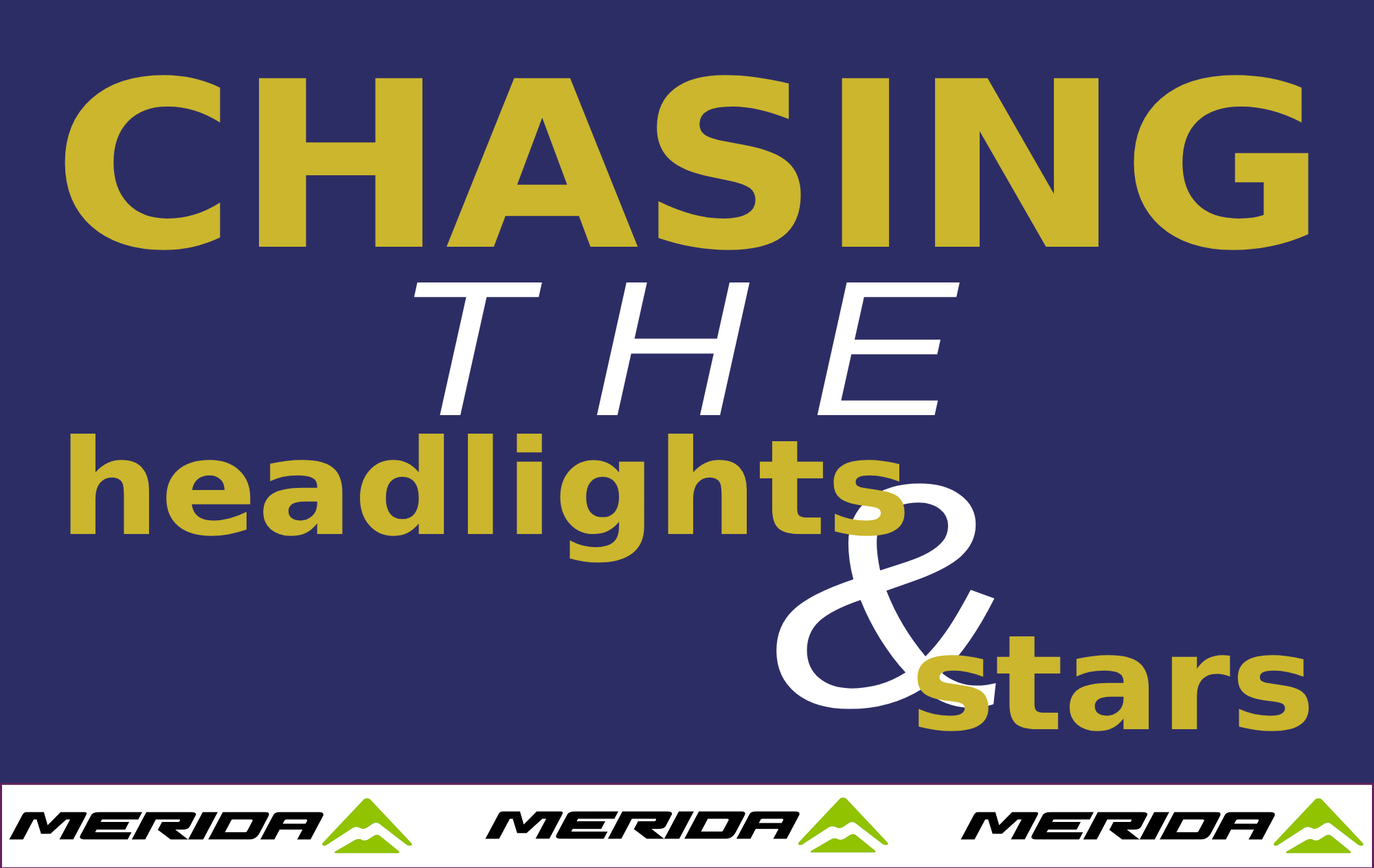
<style>
.page{position:relative;width:1374px;height:868px;background:#2d2d66}
.page>*{position:absolute;margin:0}
.t1{font:231.2px "Arial-Black";color:#cbb62d;scale:1.08 1}
.t2{font:192.7px "Arial-ItalicMT";color:#ffffff;scale:1.14 1}
.t3{font:132.1px "Arial-Black";color:#cbb62d;scale:1.08 1}
.t4{font:321.2px "Arial-ItalicMT";color:#ffffff;scale:1.14 1}
</style>
<div class="page">
<p class="t1" style="left:65px;top:75px;width:1244px;height:175px">CHASING</p>
<p class="t2" style="left:414px;top:282px;width:546px;height:133px">T H E</p>
<p class="t3" style="left:70px;top:433px;width:835px;height:130px">headlights</p>
<p class="t4" style="left:776px;top:483px;width:220px;height:226px">&amp;</p>
<p class="t3" style="left:917px;top:636px;width:392px;height:95px">stars</p>
</div>
